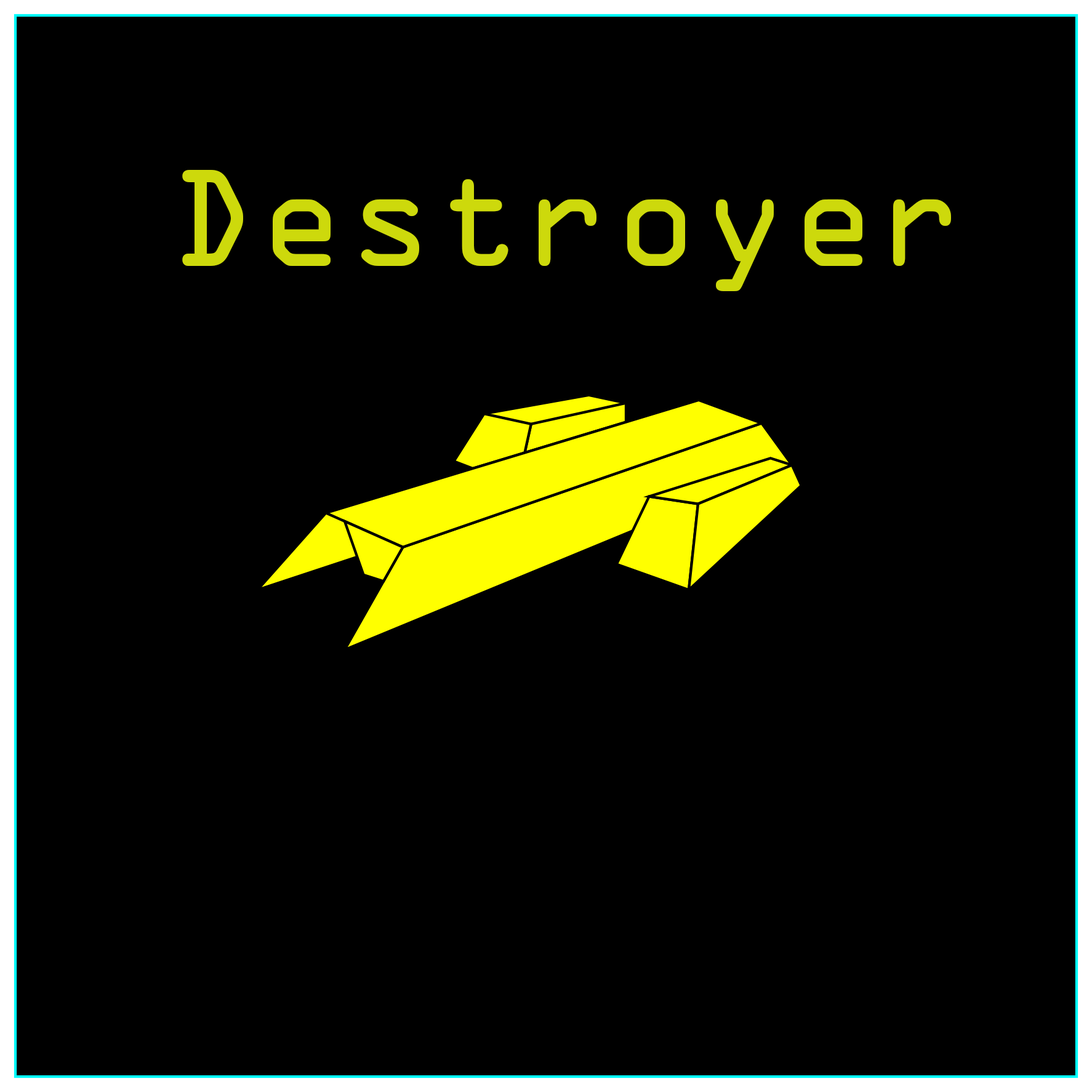
<style>
.page{position:relative;width:1092px;height:1092px;background:#000000}
.page>*{position:absolute;margin:0}
.t1{font:123.1px "OCRAStd";color:#cdd90c}
</style>
<div class="page">
<p class="t1" style="left:182px;top:170px;width:769px;height:121px">Destroyer</p>
</div>
